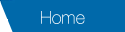
<style>
.page{position:relative;width:125px;height:32px;background:#0069aa}
.page>*{position:absolute;margin:0}
.t1{font:18px "HelveticaNeueLTCom-Th";color:#ffffff}
</style>
<div class="page">
<p class="t1" style="left:41px;top:11px;width:44px;height:13px">Home</p>
</div>
